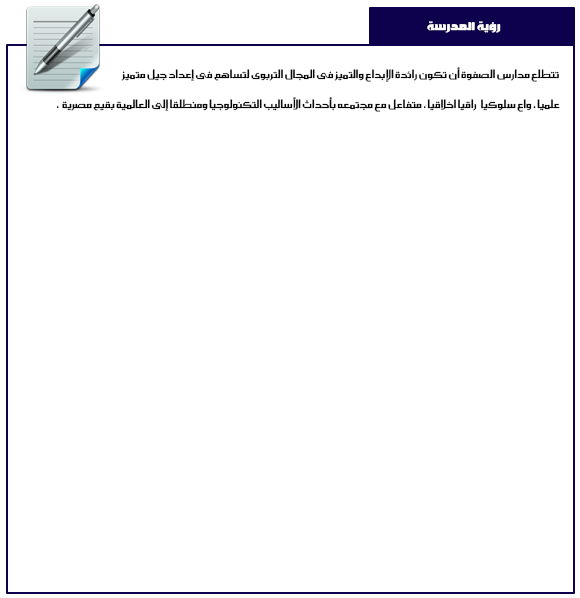
<style>
.page{position:relative;width:580px;height:598px;background:#ffffff}
.page>*{position:absolute;margin:0}
.t1{font:15px "SC_OUHOD";color:#ffffff}
.t2{font:14px "SC_KHALID";color:#060606}
</style>
<div class="page">
<p class="t1" style="left:427px;top:21px;width:74px;height:12px">رؤية  المدرسة</p>
<p class="t2" style="left:121px;top:67px;width:438px;height:15px">تتطلع مدارس الصفوة أن تكون رائدة الإبداع والتميز فى المجال التربوى لتساهم فى إعداد جيل متميز</p>
<p class="t2" style="left:56px;top:97px;width:504px;height:15px">،  علميا ، واع سلوكيا   راقيا اخلاقيا ، متفاعل مع مجتمعه بأحداث الأساليب التكنولوجيا ومنطلقا إلى العالمية بقيم مصرية</p>
</div>
